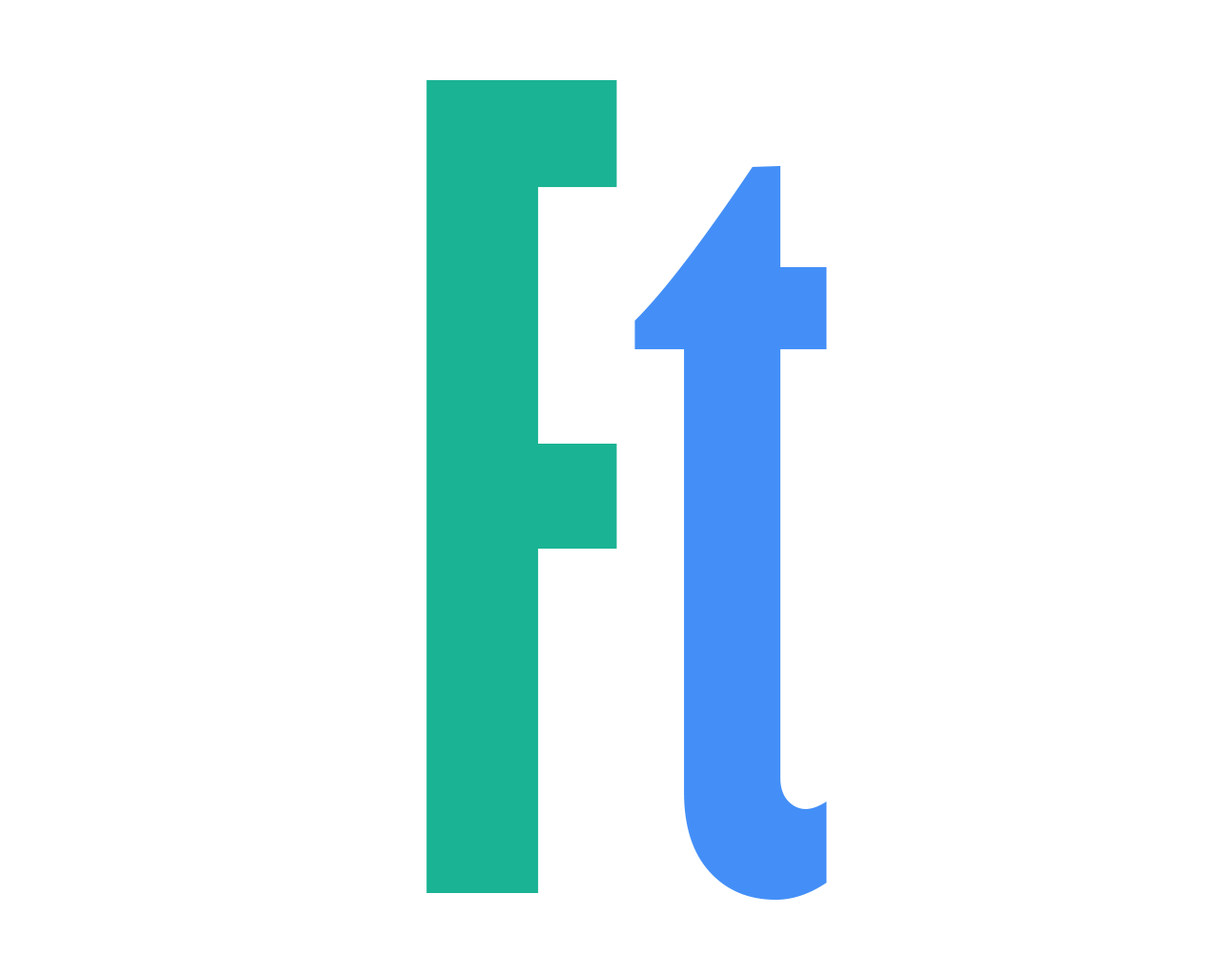
<style>
.page{position:relative;width:1221px;height:977px;background:#ffffff}
.page>*{position:absolute;margin:0}
.t1{font:1020.2px "GillSansMT-ExtraCondensedBold";color:#1ab394}
.t2{font:1020.2px "GillSansMT-ExtraCondensedBold";color:#448ff7}
</style>
<div class="page">
<p class="t1" style="left:426px;top:80px;width:401px;height:819px">F<span class="t2">t</span></p>
</div>
